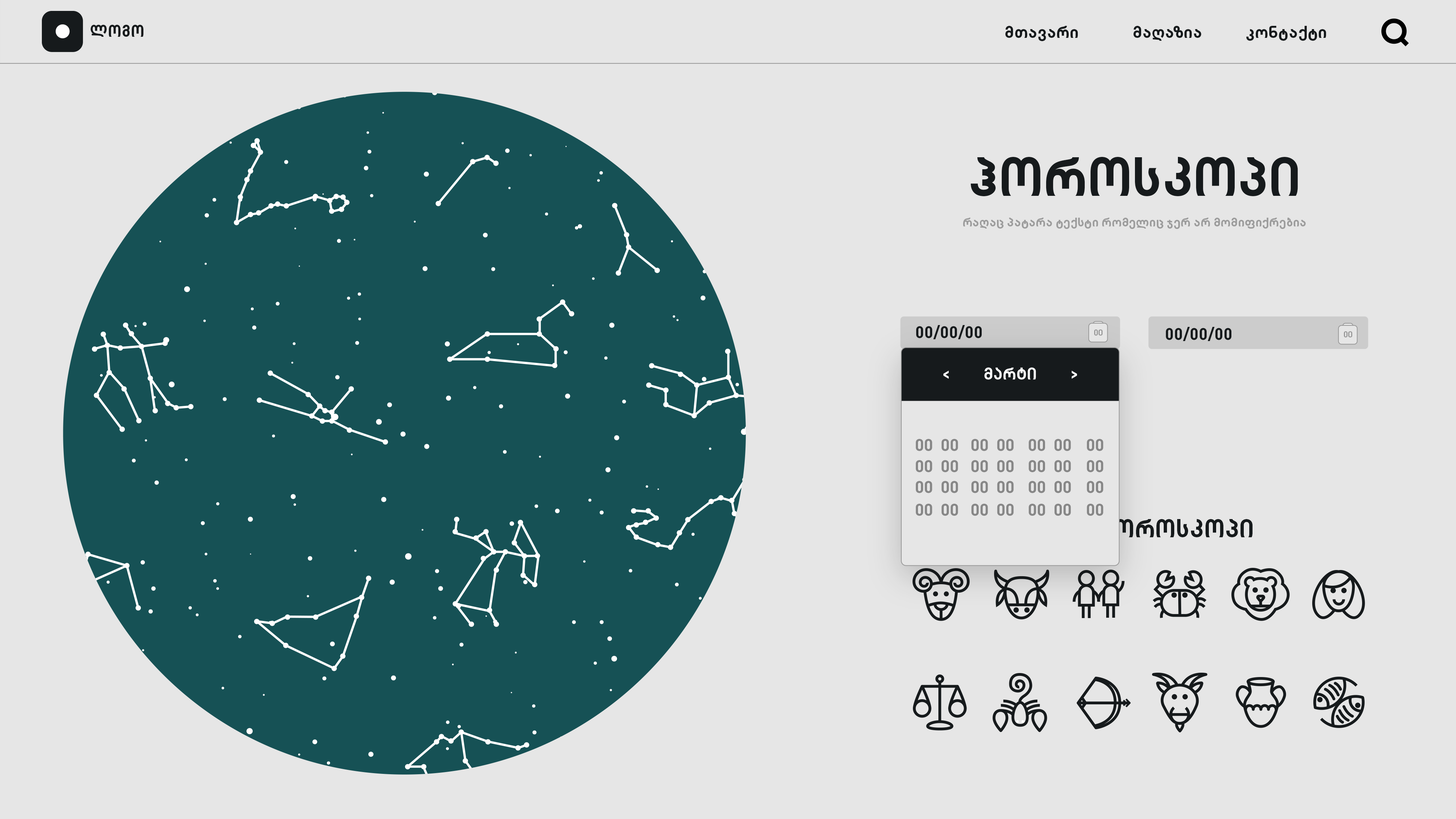
<style>
.page{position:relative;width:1456px;height:819px;background:#e6e6e6}
.page>*{position:absolute;margin:0}
.t1{font:16.7px "TBCDinMtavruli-Bold";color:#161a1c}
.t2{font:16.7px "TBCDinNusxuri-Bold";color:#161a1c}
.t3{font:54px "TBCDinMtavruli-Bold";color:#161a1c}
.t4{font:12.3px "TBCDinNusxuri-Bold";color:#9c9c9c}
.t5{font:8.7px "TBCDinMtavruli-Bold";color:#999999}
.t6{font:25.1px "TBCDinMtavruli-Bold"}
</style>
<div class="page">
<p class="t1" style="left:91px;top:25px;width:52px;height:12px">ლოგო</p>
<p class="t2" style="left:1005px;top:26px;width:73px;height:15px">მთავარი</p>
<p class="t2" style="left:1133px;top:26px;width:68px;height:15px">მაღაზია</p>
<p class="t2" style="left:1246px;top:26px;width:80px;height:15px">კონტაქტი</p>
<p class="t3" style="left:971px;top:157px;width:327px;height:39px">ჰოროსკოპი</p>
<p class="t4" style="left:963px;top:218px;width:343px;height:11px">რაღაც პატარა ტექსტი რომელიც ჯერ არ მომიფიქრებია</p>
<p class="t1" style="left:916px;top:325px;width:66px;height:14px">00/00/00</p>
<p class="t5" style="left:1094px;top:329px;width:9px;height:7px">00</p>
<p class="t1" style="left:1166px;top:327px;width:65px;height:14px">00/00/00</p>
<p class="t5" style="left:1344px;top:331px;width:8px;height:6px">00</p>
<p class="t6" style="left:1025px;top:519px;width:228px;height:18px">დღის ჰოროსკოპი</p>
</div>
